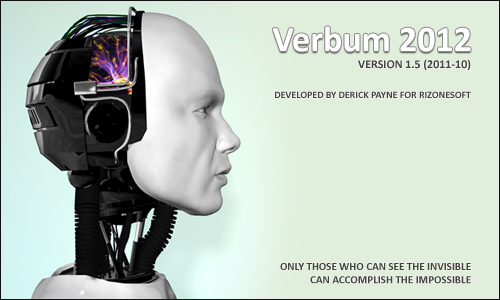
<style>
.page{position:relative;width:500px;height:300px;background:#e1eedc}
.page>*{position:absolute;margin:0}
.t1{font:36px "Calibri-Bold";color:#ffffff}
.t2{font:12px "Calibri-Bold";color:#434343}
.t3{font:10px "Calibri-Bold";color:#434343}
.t4{font:11px "Calibri-Bold";color:#434343}
</style>
<div class="page">
<p class="t1" style="left:272px;top:26px;width:199px;height:26px">Verbum 2012</p>
<p class="t2" style="left:358px;top:59px;width:113px;height:11px">VERSION 1.5 (2011-10)</p>
<p class="t3" style="left:275px;top:91px;width:196px;height:7px">DEVELOPED BY DERICK PAYNE FOR RIZONESOFT</p>
<p class="t4" style="left:280px;top:263px;width:191px;height:21px;text-align:right">ONLY THOSE WHO CAN SEE THE INVISIBLE<br>CAN ACCOMPLISH THE IMPOSSIBLE</p>
</div>
